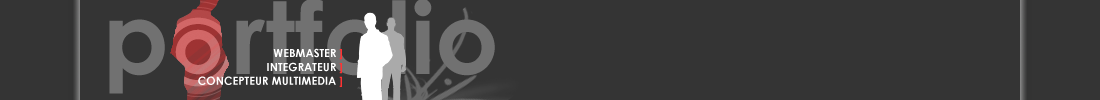
<style>
.page{position:relative;width:1100px;height:100px;background:#343434}
.page>*{position:absolute;margin:0}
.t1{font:11.1px/13.9px "CenturyGothic-Bold";color:#ffffff}
.t2{font:11.1px/13.9px "CenturyGothic-Bold";color:#ff3333}
</style>
<div class="page">
<p class="t1" style="left:198px;top:48px;width:144px;height:39px;text-align:right">WEBMASTER <span class="t2">]<br></span>INTEGRATEUR <span class="t2">]<br></span>CONCEPTEUR MULTIMEDIA <span class="t2">]</span></p>
</div>
